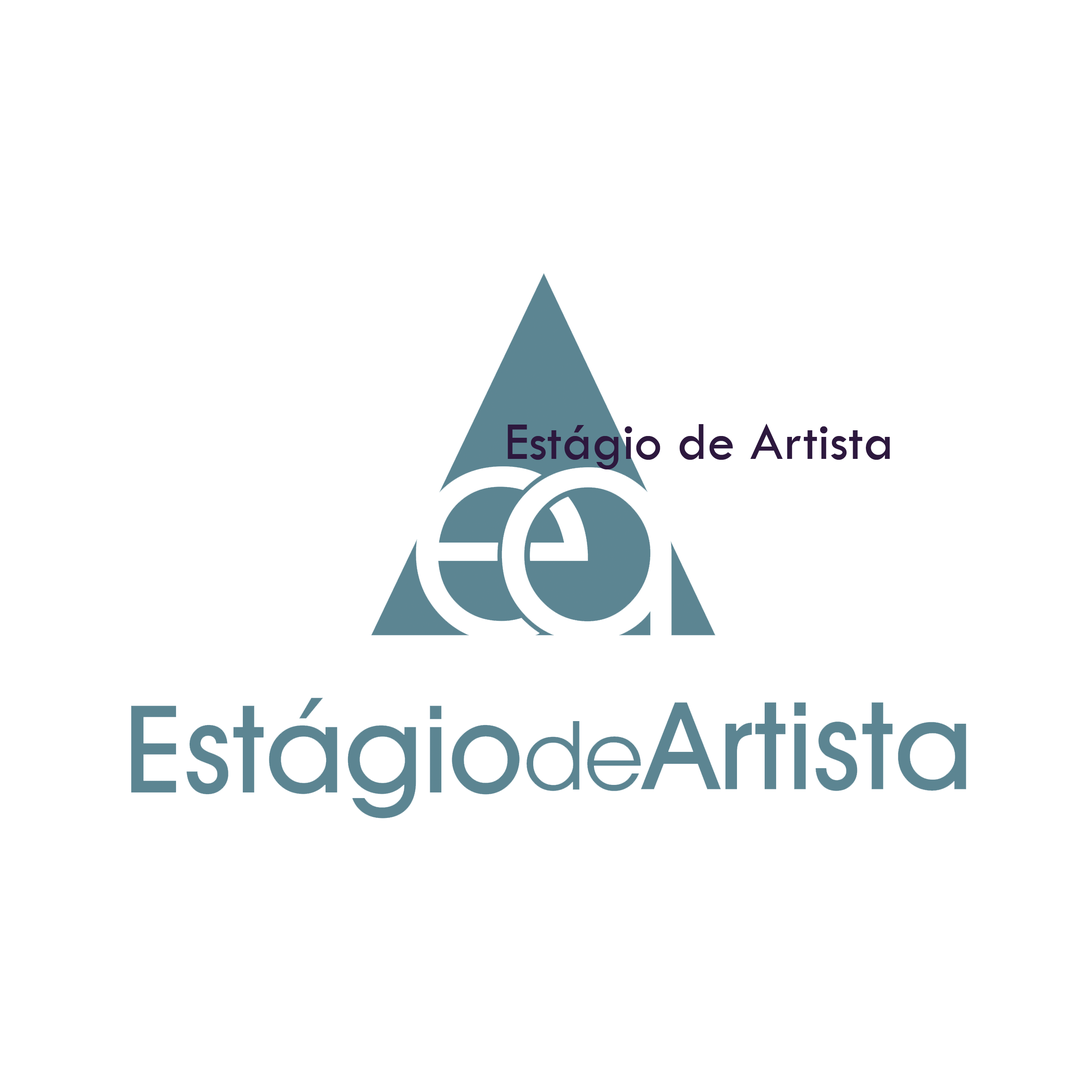
<style>
.page{position:relative;width:1092px;height:1092px;background:#ffffff}
.page>*{position:absolute;margin:0}
.t1{font:55px "TwCenMT-Regular";color:#2d183e}
</style>
<div class="page">
<p class="t1" style="left:508px;top:424px;width:382px;height:45px">Estágio de Artista</p>
</div>
